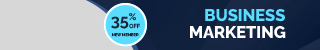
<style>
.page{position:relative;width:320px;height:50px;background:#d7d7d7}
.page>*{position:absolute;margin:0}
.t1{font:16.3px "Raleway-Bold";color:#192437}
.t2{font:16.8px "Raleway-ExtraBold";color:#58ddfe}
.t3{font:5.6px "Raleway-Medium";color:#192437}
.t4{font:16.8px "Raleway-ExtraBold";color:#ffffff}
.t5{font:3.8px "Raleway-Medium";color:#192437}
</style>
<div class="page">
<p class="t1" style="left:111px;top:13px;width:25px;height:16px">35%</p>
<p class="t2" style="left:205px;top:9px;width:80px;height:13px">BUSINESS</p>
<p class="t3" style="left:129px;top:23px;width:11px;height:6px">OFF</p>
<p class="t4" style="left:190px;top:26px;width:96px;height:12px">MARKETING</p>
<p class="t5" style="left:112px;top:33px;width:27px;height:4px">NEW MEMBER</p>
</div>
